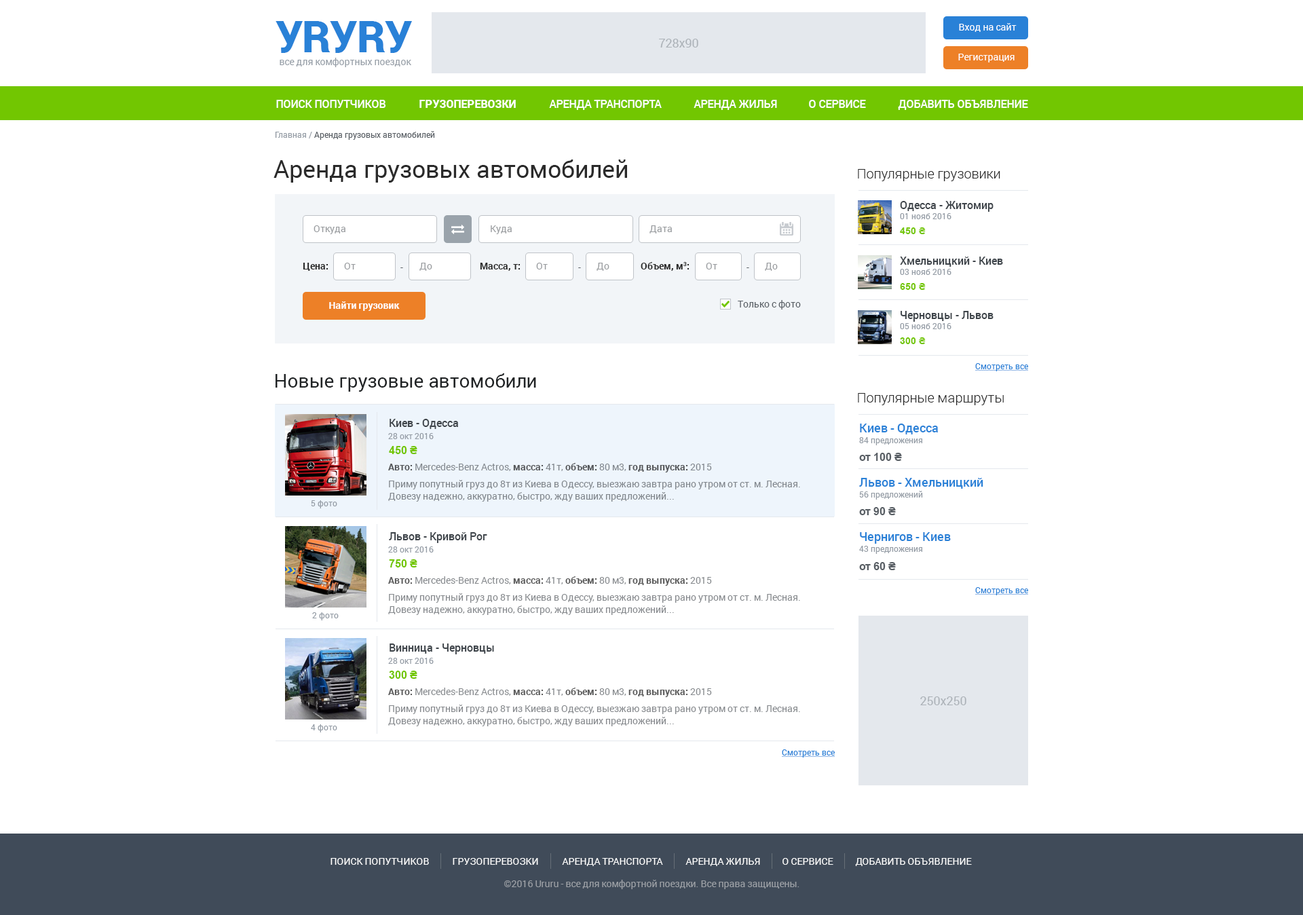
<style>
.page{position:relative;width:1303px;height:915px;background:#ffffff}
.page>*{position:absolute;margin:0}
.t1{font:43.4px "Roboto-Black";letter-spacing:-0.01em;color:#2981d7}
.t2{font:9.5px "Roboto-Regular";color:#ffffff}
.t3{font:12.2px "Roboto-Regular";color:#acb2b8}
.t4{font:9.5px "Roboto-Regular";color:#949ca5}
.t5{font:10.9px "Roboto-Medium";color:#ffffff;text-transform:uppercase}
.t6{font:10.9px "Roboto-Black";color:#ffffff;text-transform:uppercase}
.t7{font:8.1px "Roboto-Regular";color:#585e64}
.t8{font:8.1px "Roboto-Regular";color:#949ca5}
.t9{font:24.4px "Roboto-Regular";color:#2a2a2a}
.t10{font:13.6px "Roboto-Light";color:#2a2a2a}
.t11{font:10.9px "Roboto-Medium";color:#3f454b}
.t12{font:9.5px "Roboto-Regular";color:#989b9e}
.t13{font:9.5px "Arial-BoldMT";color:#72c601}
.t14{font:9.5px "Roboto-Bold";color:#2a2a2a}
.t15{font:9.5px "Roboto-Regular";color:#585e64}
.t16{font:9.5px "Roboto-Bold";color:#ffffff}
.t17{font:8.1px "Roboto-Regular";color:#2981d7;text-decoration:underline}
.t18{font:19px "Roboto-Regular";color:#202325}
.t19{font:12.2px "Roboto-Medium";color:#2981d7}
.t20{font:10.9px "Arial-BoldMT";color:#72c601}
.t21{font:10.9px "Arial-BoldMT";color:#585e64}
.t22{font:9.5px "Roboto-Bold";color:#000000}
.t23{font:9.5px/12.2px "Roboto-Regular";color:#80868c}
.t24{font:9.5px/12.2px "Roboto-Regular";color:#86898d}
.t25{font:9.5px "Roboto-Regular";color:#ffffff;text-transform:uppercase}
.t26{font:9.5px "Roboto-Regular";color:#9ca0a6}
</style>
<div class="page">
<p class="t1" style="left:276px;top:21px;width:136px;height:32px">УRУRУ</p>
<p class="t2" style="left:959px;top:23px;width:58px;height:9px">Вход на сайт</p>
<p class="t3" style="left:659px;top:39px;width:39px;height:9px">728x90</p>
<p class="t2" style="left:958px;top:54px;width:57px;height:8px">Регистрация</p>
<p class="t4" style="left:280px;top:58px;width:131px;height:9px">все для комфортных поездок</p>
<p class="t5" style="left:276px;top:100px;width:110px;height:8px">Поиск попутчиков</p>
<p class="t6" style="left:419px;top:100px;width:97px;height:8px">грузоперевозки</p>
<p class="t5" style="left:549px;top:100px;width:113px;height:10px">Аренда транспорта</p>
<p class="t5" style="left:694px;top:100px;width:83px;height:10px">Аренда жилья</p>
<p class="t5" style="left:809px;top:100px;width:57px;height:8px">о сервисе</p>
<p class="t5" style="left:898px;top:100px;width:130px;height:10px">добавить объявление</p>
<p class="t7" style="left:275px;top:131px;width:160px;height:9px"><span class="t8">Главная /</span> Аренда грузовых автомобилей</p>
<p class="t9" style="left:274px;top:160px;width:353px;height:23px">Аренда грузовых автомобилей</p>
<p class="t10" style="left:858px;top:169px;width:143px;height:12px">Популярные грузовики</p>
<p class="t11" style="left:900px;top:201px;width:94px;height:11px">Одесса - Житомир</p>
<p class="t8" style="left:900px;top:213px;width:52px;height:6px">01 нояб 2016</p>
<p class="t12" style="left:314px;top:225px;width:31px;height:9px">Откуда</p>
<p class="t12" style="left:491px;top:225px;width:21px;height:9px">Куда</p>
<p class="t12" style="left:650px;top:225px;width:22px;height:8px">Дата</p>
<p class="t13" style="left:900px;top:227px;width:26px;height:7px">450 ₴</p>
<p class="t11" style="left:900px;top:257px;width:103px;height:10px">Хмельницкий - Киев</p>
<p class="t14" style="left:303px;top:263px;width:26px;height:8px">Цена:</p>
<p class="t12" style="left:344px;top:263px;width:12px;height:6px">От</p>
<p class="t15" style="left:400px;top:267px;width:3px;height:1px">-</p>
<p class="t12" style="left:419px;top:263px;width:13px;height:8px">До</p>
<p class="t14" style="left:480px;top:263px;width:41px;height:8px">Масса, т:</p>
<p class="t12" style="left:536px;top:263px;width:12px;height:6px">От</p>
<p class="t15" style="left:578px;top:267px;width:3px;height:1px">-</p>
<p class="t12" style="left:597px;top:263px;width:13px;height:8px">До</p>
<p class="t14" style="left:641px;top:261px;width:49px;height:10px">Объем, м3:</p>
<p class="t12" style="left:706px;top:263px;width:11px;height:6px">От</p>
<p class="t15" style="left:747px;top:267px;width:2px;height:1px">-</p>
<p class="t12" style="left:765px;top:263px;width:13px;height:8px">До</p>
<p class="t8" style="left:900px;top:269px;width:52px;height:6px">03 нояб 2016</p>
<p class="t13" style="left:900px;top:283px;width:26px;height:7px">650 ₴</p>
<p class="t16" style="left:329px;top:301px;width:71px;height:10px">Найти грузовик</p>
<p class="t15" style="left:738px;top:300px;width:63px;height:10px">Только с фото</p>
<p class="t11" style="left:901px;top:311px;width:93px;height:11px">Черновцы - Львов</p>
<p class="t8" style="left:900px;top:323px;width:52px;height:6px">05 нояб 2016</p>
<p class="t13" style="left:900px;top:337px;width:26px;height:7px">300 ₴</p>
<p class="t17" style="left:975px;top:363px;width:53px;height:8px">Смотреть все</p>
<p class="t18" style="left:276px;top:373px;width:260px;height:19px">Новые грузовые автомобили</p>
<p class="t10" style="left:858px;top:393px;width:146px;height:12px">Популярные маршруты</p>
<p class="t11" style="left:390px;top:419px;width:68px;height:10px">Киев - Одесса</p>
<p class="t19" style="left:860px;top:424px;width:78px;height:10px">Киев - Одесса</p>
<p class="t8" style="left:388px;top:433px;width:46px;height:6px">28 окт 2016</p>
<p class="t8" style="left:859px;top:437px;width:63px;height:8px">84 предложения</p>
<p class="t20" style="left:389px;top:446px;width:28px;height:8px">450 ₴</p>
<p class="t21" style="left:859px;top:453px;width:43px;height:8px">от 100 ₴</p>
<p class="t15" style="left:388px;top:463px;width:324px;height:9px;opacity:0.79"><span class="t22">Авто: </span>Mercedes-Benz Actros, <span class="t22">масса: </span>41т, <span class="t22">объем:</span> 80 м3, <span class="t22">год выпуска: </span>2015</p>
<p class="t23" style="left:388px;top:480px;width:412px;height:22px">Приму попутный груз до 8т из Киева в Одессу, выезжаю завтра рано утром от ст. м. Лесная. Довезу надежно, аккуратно, быстро, жду ваших предложений...</p>
<p class="t19" style="left:859px;top:478px;width:125px;height:11px">Львов - Хмельницкий</p>
<p class="t8" style="left:859px;top:491px;width:64px;height:9px">56 предложений</p>
<p class="t8" style="left:311px;top:500px;width:26px;height:8px">5 фото</p>
<p class="t21" style="left:859px;top:507px;width:37px;height:8px">от 90 ₴</p>
<p class="t11" style="left:389px;top:532px;width:98px;height:11px">Львов - Кривой Рог</p>
<p class="t19" style="left:860px;top:532px;width:91px;height:12px">Чернигов - Киев</p>
<p class="t8" style="left:859px;top:546px;width:63px;height:8px">43 предложения</p>
<p class="t8" style="left:388px;top:546px;width:46px;height:7px">28 окт 2016</p>
<p class="t20" style="left:389px;top:559px;width:28px;height:8px">750 ₴</p>
<p class="t21" style="left:859px;top:562px;width:37px;height:8px">от 60 ₴</p>
<p class="t15" style="left:388px;top:576px;width:324px;height:10px;opacity:0.79"><span class="t22">Авто: </span>Mercedes-Benz Actros, <span class="t22">масса: </span>41т, <span class="t22">объем:</span> 80 м3, <span class="t22">год выпуска: </span>2015</p>
<p class="t24" style="left:388px;top:593px;width:412px;height:22px">Приму попутный груз до 8т из Киева в Одессу, выезжаю завтра рано утром от ст. м. Лесная. Довезу надежно, аккуратно, быстро, жду ваших предложений...</p>
<p class="t17" style="left:975px;top:587px;width:53px;height:8px">Смотреть все</p>
<p class="t8" style="left:312px;top:612px;width:27px;height:8px">2 фото</p>
<p class="t11" style="left:390px;top:643px;width:104px;height:11px">Винница - Черновцы</p>
<p class="t8" style="left:388px;top:658px;width:46px;height:6px">28 окт 2016</p>
<p class="t20" style="left:389px;top:671px;width:28px;height:8px">300 ₴</p>
<p class="t15" style="left:388px;top:688px;width:324px;height:9px;opacity:0.79"><span class="t22">Авто: </span>Mercedes-Benz Actros, <span class="t22">масса: </span>41т, <span class="t22">объем:</span> 80 м3, <span class="t22">год выпуска: </span>2015</p>
<p class="t3" style="left:920px;top:696px;width:47px;height:9px">250х250</p>
<p class="t24" style="left:388px;top:705px;width:412px;height:21px">Приму попутный груз до 8т из Киева в Одессу, выезжаю завтра рано утром от ст. м. Лесная. Довезу надежно, аккуратно, быстро, жду ваших предложений...</p>
<p class="t8" style="left:311px;top:724px;width:26px;height:8px">4 фото</p>
<p class="t17" style="left:782px;top:749px;width:53px;height:9px">Смотреть все</p>
<p class="t25" style="left:331px;top:858px;width:98px;height:7px">Поиск попутчиков</p>
<p class="t25" style="left:453px;top:858px;width:85px;height:7px">грузоперевозки</p>
<p class="t25" style="left:562px;top:858px;width:101px;height:8px">Аренда транспорта</p>
<p class="t25" style="left:686px;top:858px;width:74px;height:8px">Аренда жилья</p>
<p class="t25" style="left:783px;top:858px;width:51px;height:7px">о сервисе</p>
<p class="t25" style="left:855px;top:858px;width:117px;height:8px">добавить объявление</p>
<p class="t26" style="left:504px;top:880px;width:296px;height:9px">©2016 Ururu - все для комфортной поездки. Все права защищены.</p>
</div>
